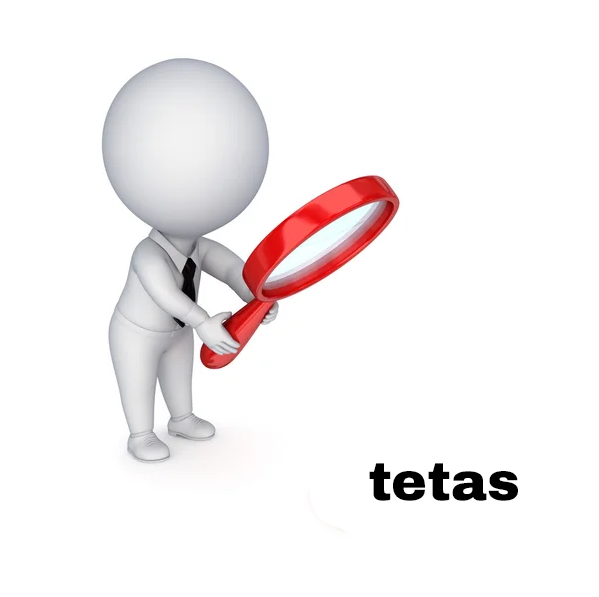
<style>
.page{position:relative;width:599px;height:597px;background:#ffffff}
.page>*{position:absolute;margin:0}
.t1{font:53.6px "ArchivoBlack-Regular";color:#000000}
</style>
<div class="page">
<p class="t1" style="left:369px;top:463px;width:149px;height:38px">tetas</p>
</div>
